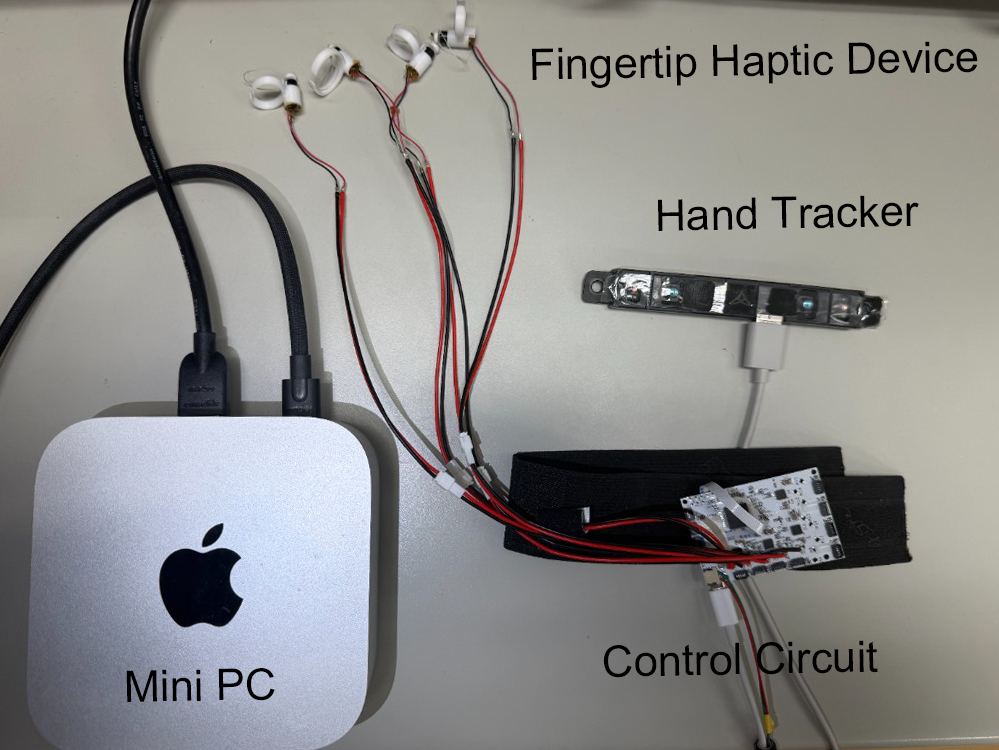
<style>
.page{position:relative;width:999px;height:750px}
.page>*{position:absolute;margin:0}
.t1{font:43.6px "ArialMT";color:#000000}
</style>
<div class="page">
<p class="t1" style="left:532px;top:41px;width:446px;height:47px;rotate:-1deg">Fingertip Haptic Device</p>
<p class="t1" style="left:658px;top:195px;width:261px;height:36px;rotate:-1deg">Hand Tracker</p>
<p class="t1" style="left:603px;top:640px;width:275px;height:38px;rotate:-1deg">Control Circuit</p>
<p class="t1" style="left:126px;top:668px;width:149px;height:34px;rotate:-1deg">Mini PC</p>
</div>
